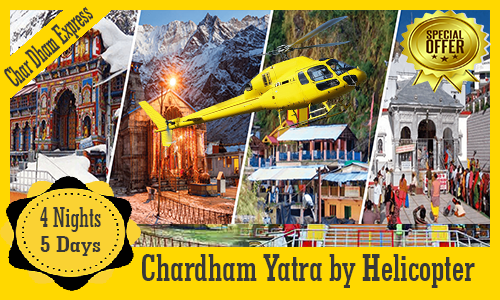
<style>
.page{position:relative;width:500px;height:300px}
.page>*{position:absolute;margin:0}
.t1{font:30px "GeometricSlab703BT-BoldCond";color:#383838;scale:0.54 1}
.t2{font:30px "GeometricSlab703BT-BoldCond";color:#383838;scale:0.75 1}
.t3{font:23.8px "GeometricSlab703BT-BoldCond";color:#383838;scale:1.15 1}
.t4{font:40.1px "GeometricSlab703BT-BoldCond";color:#383838;scale:0.84 1}
</style>
<div class="page">
<p class="t1" style="left:4px;top:6px;width:90px;height:81px;rotate:-42deg">Char Dham Express</p>
<p class="t2" style="left:40px;top:207px;width:61px;height:25px">4 Nights</p>
<p class="t3" style="left:40px;top:236px;width:61px;height:20px">5 Days</p>
<p class="t4" style="left:142px;top:254px;width:333px;height:34px">Chardham Yatra by Helicopter</p>
</div>
